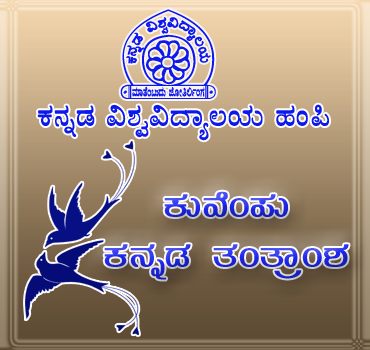
<style>
.page{position:relative;width:370px;height:350px}
.page>*{position:absolute;margin:0}
.t1{font:125.6px "AA";color:#0d18eb}
.t2{font:33.8px "Maruthi03";color:#0d18eb}
.t3{font:42.1px "Maruthi02"}
</style>
<div class="page">
<p class="t1" style="left:120px;top:9px;width:96px;height:90px">A</p>
<p class="t2" style="left:37px;top:104px;width:292px;height:37px">PÀ£ÀßqÀ «±Àé«zÁå®AiÀÄ ºÀA¦</p>
<p class="t3" style="left:104px;top:191px;width:245px;height:89px;text-align:center">PÀÄªÉA¥ÀÄ <br>PÀ£ÀßqÀ vÀAvÁæA±À</p>
</div>
